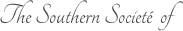
<style>
.page{position:relative;width:183px;height:31px;background:#ffffff}
.page>*{position:absolute;margin:0}
.t1{font:30px "Tangerine";color:#474545}
</style>
<div class="page">
<p class="t1" style="left:0px;top:0px;width:183px;height:31px">The Southern Societé  of</p>
</div>
